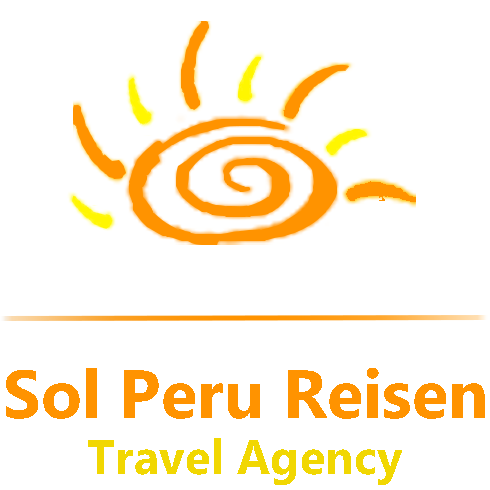
<style>
.page{position:relative;width:490px;height:490px;background:#ffffff}
.page>*{position:absolute;margin:0}
.t1{font:68px "Ebrima-Bold";color:#ff9300}
.t2{font:48px "Ebrima-Bold";color:#f1d702}
</style>
<div class="page">
<p class="t1" style="left:6px;top:368px;width:479px;height:51px">Sol Peru Reisen</p>
<p class="t2" style="left:88px;top:438px;width:314px;height:47px">Travel Agency</p>
</div>
